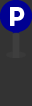
<style>
.page{position:relative;width:32px;height:106px;background:#333333}
.page>*{position:absolute;margin:0}
.t1{font:28px "Archive";letter-spacing:-0.03em;color:#ffffff}
</style>
<div class="page">
<p class="t1" style="left:10px;top:7px;width:15px;height:19px">P</p>
</div>
